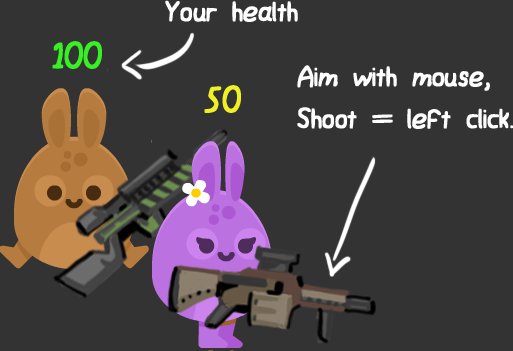
<style>
.page{position:relative;width:513px;height:351px;background:#333333}
.page>*{position:absolute;margin:0}
.t1{font:34.8px "JWerd";color:#ffffff}
.t2{font:43.8px "JWerd";color:#38f125}
.t3{font:43.8px "JWerd";color:#eff125}
</style>
<div class="page">
<p class="t1" style="left:165px;top:0px;width:133px;height:22px">Your health</p>
<p class="t2" style="left:52px;top:41px;width:50px;height:28px">100</p>
<p class="t1" style="left:297px;top:65px;width:217px;height:64px">Aim with mouse,<br>Shoot = left click.</p>
<p class="t3" style="left:204px;top:85px;width:37px;height:28px">50</p>
</div>
